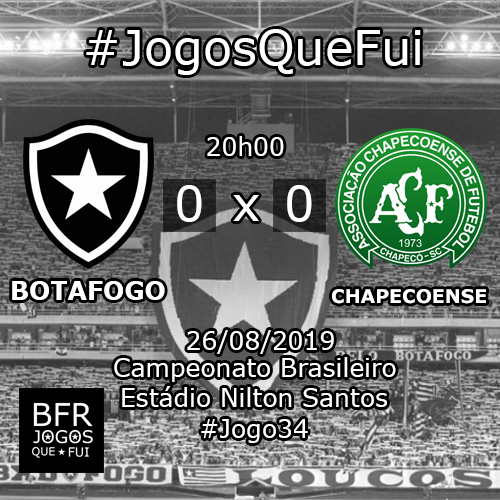
<style>
.page{position:relative;width:500px;height:500px}
.page>*{position:absolute;margin:0}
.t1{font:48px "Verdana";color:#ffffff}
.t2{font:25px "Verdana";color:#ffffff}
.t3{font:25px "Verdana-Bold";color:#ffffff}
.t4{font:18.8px "Verdana-Bold";color:#ffffff}
</style>
<div class="page">
<p class="t1" style="left:86px;top:29px;width:335px;height:46px">#JogosQueFui</p>
<p class="t2" style="left:207px;top:136px;width:77px;height:20px">20h00</p>
<p class="t1" style="left:177px;top:185px;width:25px;height:37px">0</p>
<p class="t1" style="left:287px;top:185px;width:25px;height:37px">0</p>
<p class="t1" style="left:233px;top:195px;width:26px;height:26px">x</p>
<p class="t3" style="left:12px;top:281px;width:153px;height:19px">BOTAFOGO</p>
<p class="t4" style="left:332px;top:289px;width:154px;height:15px">CHAPECOENSE</p>
<p class="t2" style="left:187px;top:330px;width:147px;height:24px">26/08/2019</p>
<p class="t2" style="left:114px;top:357px;width:282px;height:25px">Campeonato Brasileiro</p>
<p class="t2" style="left:122px;top:386px;width:265px;height:21px">Estádio Nilton Santos</p>
<p class="t2" style="left:201px;top:419px;width:107px;height:24px">#Jogo34</p>
</div>
